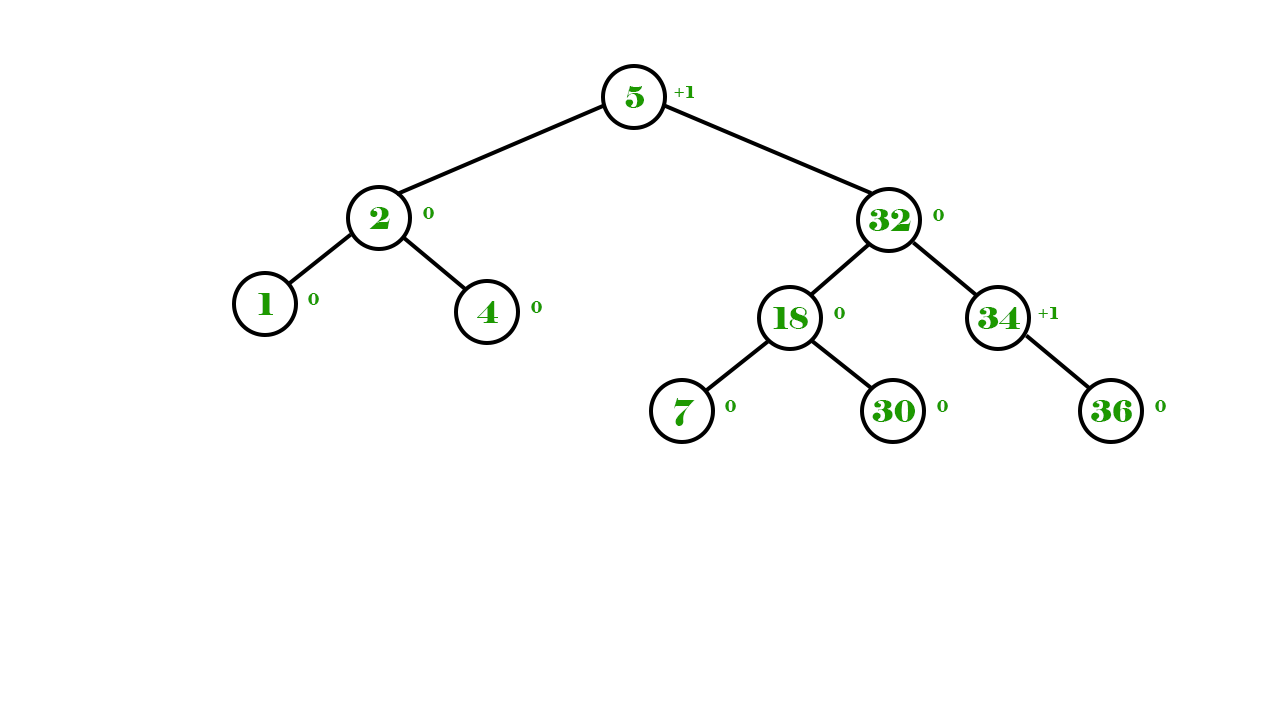
<style>
.page{position:relative;width:1280px;height:720px;background:#ffffff}
.page>*{position:absolute;margin:0}
.t1{font:30px "Elephant-Regular";color:#1d9900}
.t2{font:16px "Elephant-Regular";color:#1d9900}
</style>
<div class="page">
<p class="t1" style="left:625px;top:86px;width:19px;height:22px">5</p>
<p class="t2" style="left:674px;top:86px;width:20px;height:12px">+1</p>
<p class="t1" style="left:369px;top:207px;width:21px;height:22px">2</p>
<p class="t2" style="left:423px;top:207px;width:11px;height:12px">0</p>
<p class="t1" style="left:869px;top:209px;width:42px;height:22px">32</p>
<p class="t2" style="left:933px;top:209px;width:11px;height:12px">0</p>
<p class="t1" style="left:258px;top:293px;width:15px;height:22px">1</p>
<p class="t2" style="left:308px;top:293px;width:11px;height:12px">0</p>
<p class="t1" style="left:477px;top:301px;width:21px;height:22px">4</p>
<p class="t2" style="left:531px;top:301px;width:11px;height:12px">0</p>
<p class="t1" style="left:773px;top:307px;width:35px;height:22px">18</p>
<p class="t2" style="left:834px;top:307px;width:11px;height:12px">0</p>
<p class="t1" style="left:978px;top:307px;width:42px;height:22px">34</p>
<p class="t2" style="left:1038px;top:307px;width:20px;height:12px">+1</p>
<p class="t1" style="left:674px;top:398px;width:21px;height:28px">7</p>
<p class="t2" style="left:725px;top:400px;width:11px;height:12px">0</p>
<p class="t1" style="left:872px;top:400px;width:43px;height:22px">30</p>
<p class="t2" style="left:937px;top:400px;width:11px;height:12px">0</p>
<p class="t1" style="left:1091px;top:400px;width:41px;height:22px">36</p>
<p class="t2" style="left:1155px;top:400px;width:11px;height:12px">0</p>
</div>
